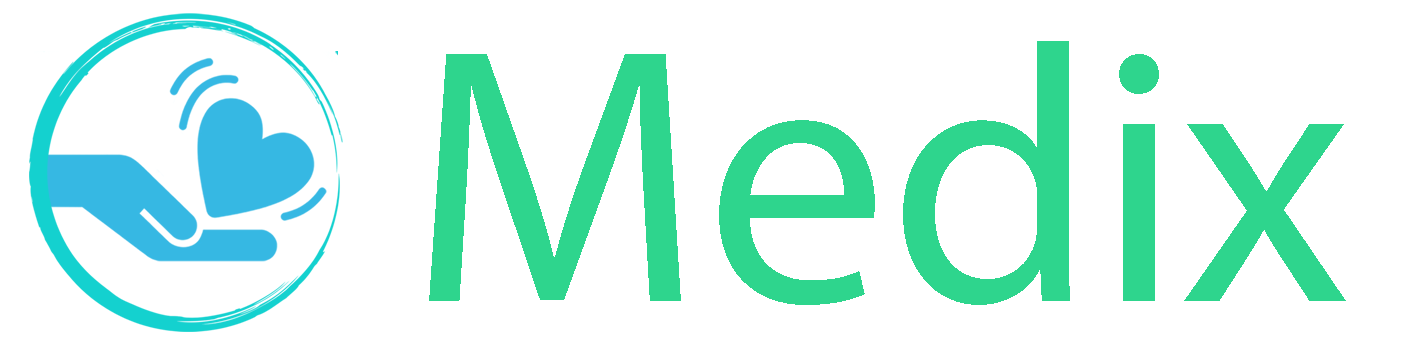
<style>
.page{position:relative;width:1415px;height:346px;background:#ffffff}
.page>*{position:absolute;margin:0}
.t1{font:366.7px "MyriadPro-Regular";color:#2ed58d}
</style>
<div class="page">
<p class="t1" style="left:429px;top:41px;width:917px;height:264px">Medix</p>
</div>
